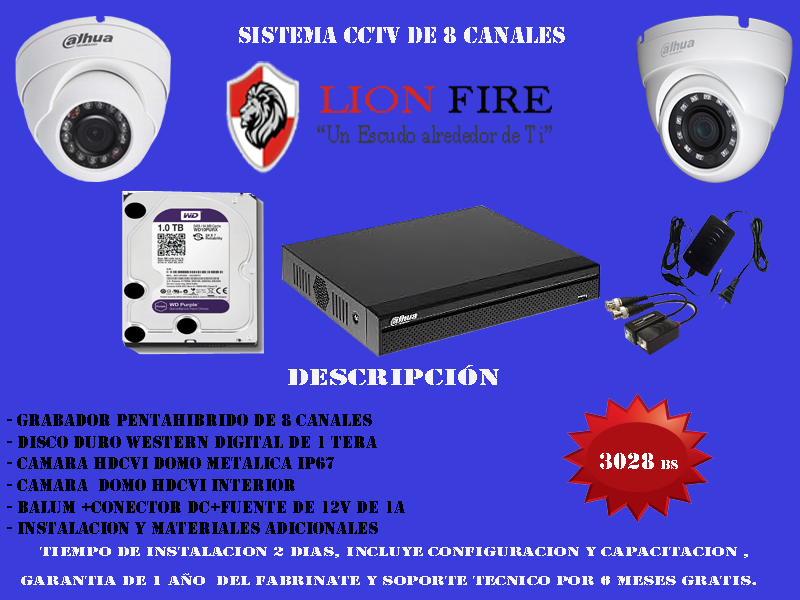
<style>
.page{position:relative;width:800px;height:600px;background:#3a3cdc}
.page>*{position:absolute;margin:0}
.t1{font:24px "Stencil";color:#f5f5f9}
.t2{font:24px "Stencil";color:#f5f5f9;scale:1.38 1}
.t3{font:18px "Stencil";color:#000007}
.t4{font:24px "Stencil";color:#ffffff}
.t5{font:14px "Stencil";color:#ffffff}
.t6{font:14px "Stencil";color:#f5f5f9;scale:1.38 1}
</style>
<div class="page">
<p class="t1" style="left:239px;top:27px;width:326px;height:16px">Sistema CCTV de 8 Canales</p>
<p class="t2" style="left:288px;top:365px;width:211px;height:20px">DESCRIPCIÓN</p>
<p class="t3" style="left:7px;top:414px;width:398px;height:120px">- GRABADOR PENTAHIBRIDO DE 8 CANALES<br>- DISCO DURO WESTERN DIGITAL DE 1 TERA<br>- CAMARA HDCVI DOMO METALICA IP67<br>- CAMARA  DOMO HDCVI INTERIOR <br>- BALUM +CONECTOR DC+FUENTE DE 12V DE 1A<br>- iNSTALACION Y MATERIALES ADICIONALES</p>
<p class="t4" style="left:600px;top:453px;width:78px;height:16px">3028 <span class="t5">bs</span></p>
<p class="t6" style="left:21px;top:547px;width:735px;height:38px;text-align:center">tiempo de instalacion 2 dias, incluye configuracion y capacitacion , <br>garantia de 1 año  del fabrinate y soporte tecnico por 6 meses gratis.</p>
</div>
